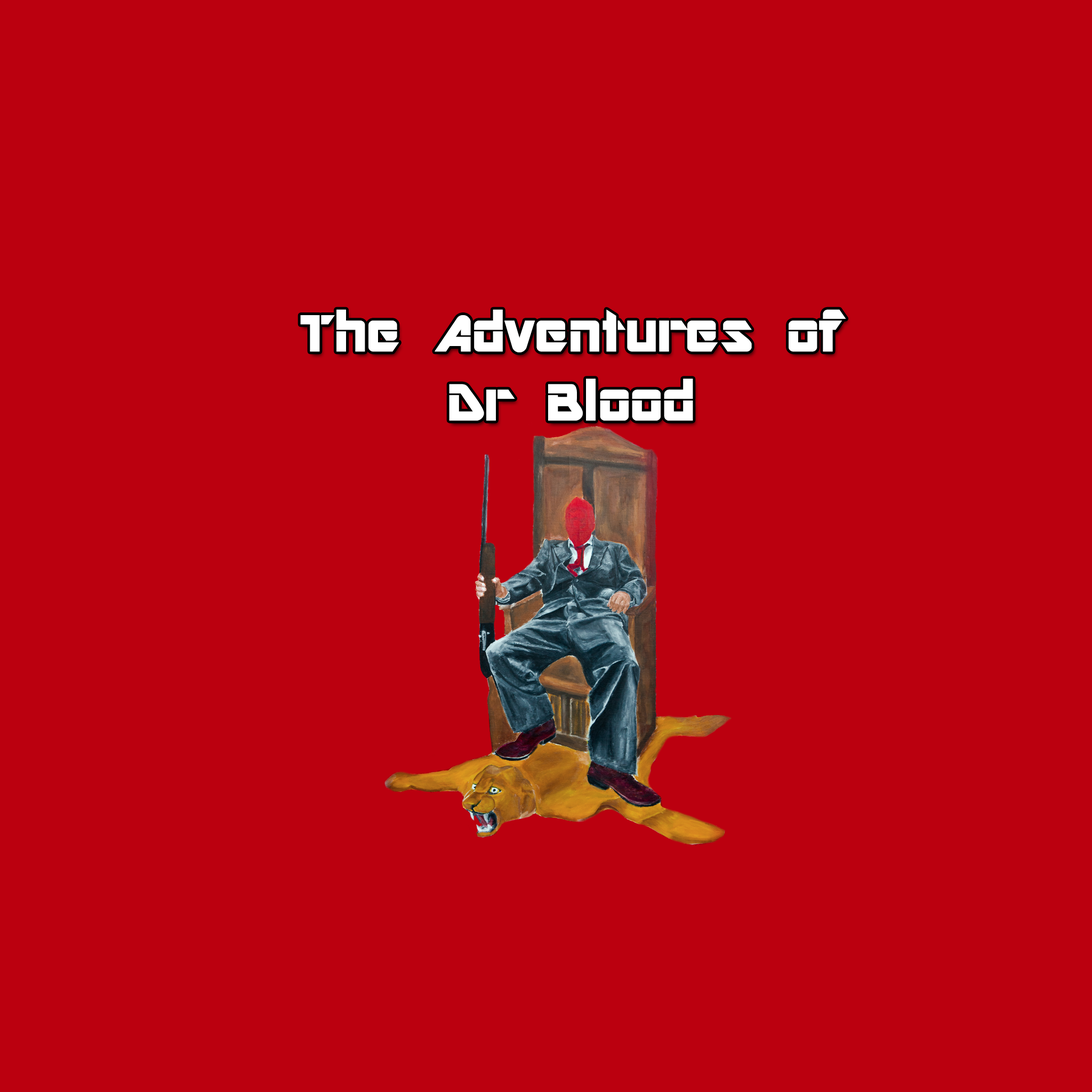
<style>
.page{position:relative;width:1092px;height:1092px;background:#bb000f}
.page>*{position:absolute;margin:0}
.t1{font:57.6px "ARDESTINE";color:#ffffff;scale:1.04 1}
</style>
<div class="page">
<p class="t1" style="left:300px;top:309px;width:546px;height:112px;text-align:center">The Adventures of<br>Dr Blood</p>
</div>
